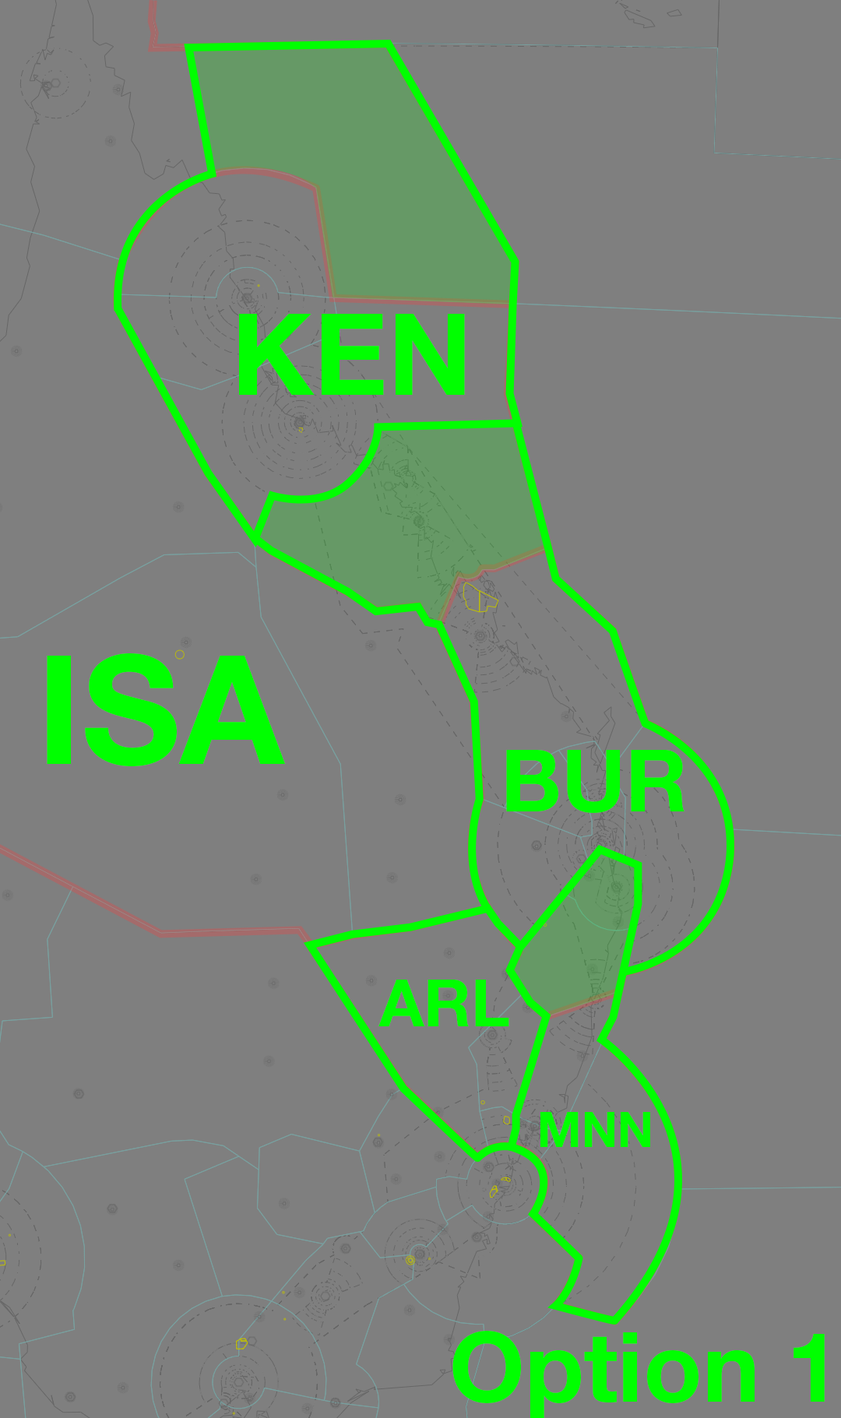
<style>
.page{position:relative;width:841px;height:1418px;background:#7f7f7f}
.page>*{position:absolute;margin:0}
.t1{font:113.7px "HelveticaNeueLTStd-Bd";color:#00ff00}
.t2{font:151.6px "HelveticaNeueLTStd-Bd";color:#00ff00}
.t3{font:86.2px "HelveticaNeueLTStd-Bd";color:#00ff00}
.t4{font:65.4px "HelveticaNeueLTStd-Bd";color:#00ff00}
.t5{font:49px "HelveticaNeueLTStd-Bd";color:#00ff00}
.t6{font:96.6px "HelveticaNeueLTStd-Bd";color:#00ff00}
</style>
<div class="page">
<p class="t1" style="left:239px;top:314px;width:226px;height:81px">KEN</p>
<p class="t2" style="left:47px;top:653px;width:238px;height:113px">ISA</p>
<p class="t3" style="left:506px;top:750px;width:178px;height:63px">BUR</p>
<p class="t4" style="left:378px;top:980px;width:131px;height:46px">ARL</p>
<p class="t5" style="left:540px;top:1112px;width:110px;height:35px">MNN</p>
<p class="t6" style="left:452px;top:1331px;width:373px;height:89px">Option 1</p>
</div>
